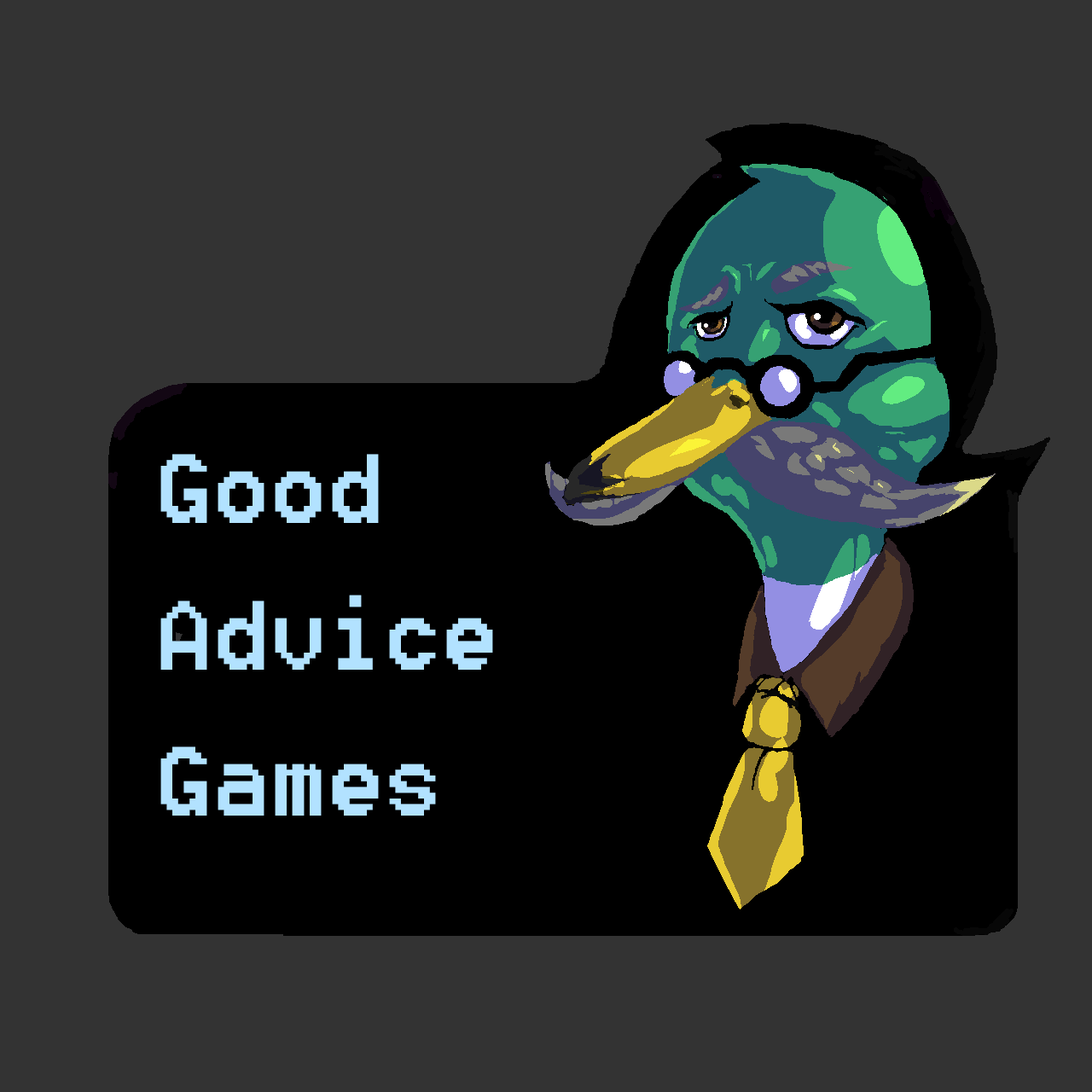
<style>
.page{position:relative;width:1092px;height:1092px;background:#333333}
.page>*{position:absolute;margin:0}
.t1{font:122px "8514oem";color:#b2e2ff}
</style>
<div class="page">
<p class="t1" style="left:160px;top:454px;width:333px;height:362px">Good <br>Advice <br>Games</p>
</div>
